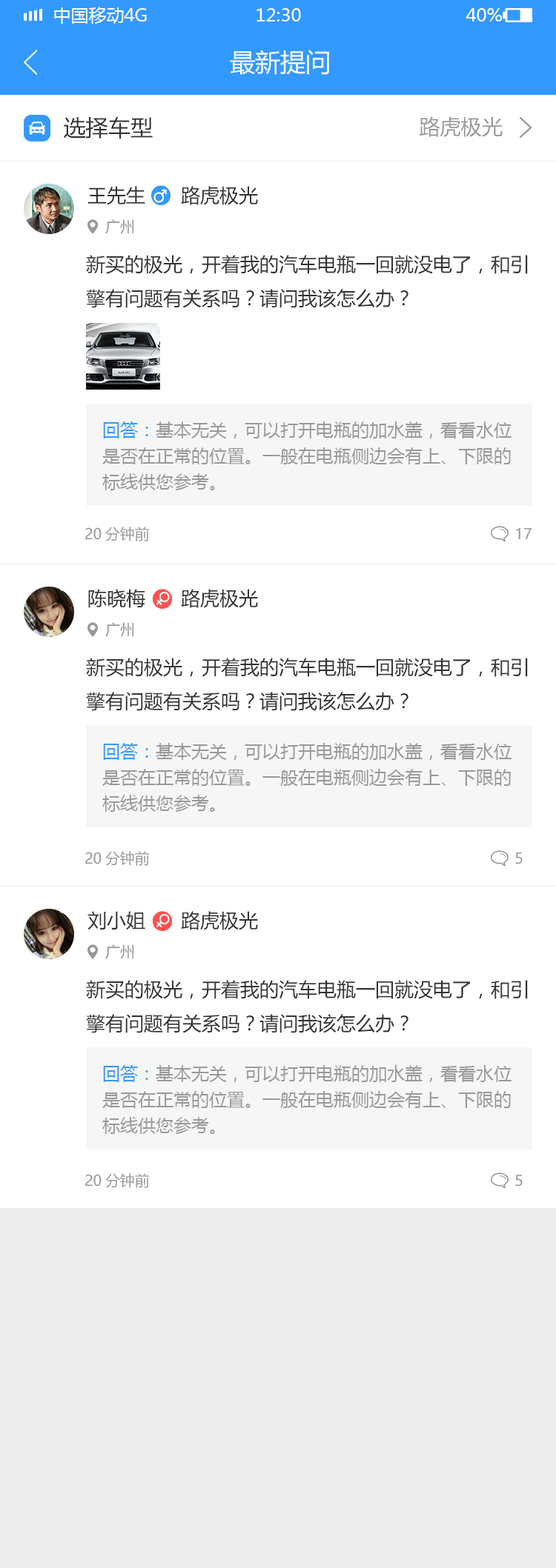
<style>
.page{position:relative;width:556px;height:1568px;background:#ffffff}
.page>*{position:absolute;margin:0}
.t1{font:17.8px "MicrosoftYaHei";color:#ffffff;text-transform:uppercase}
.t2{font:25.2px "MicrosoftYaHei";color:#ffffff}
.t3{font:22.2px "MicrosoftYaHei";color:#333333}
.t4{font:20.7px "MicrosoftYaHei";color:#999999}
.t5{font:19.3px "MicrosoftYaHei";color:#333333}
.t6{font:14.8px "MicrosoftYaHei";color:#999999}
.t7{font:17.8px/25.9px "MicrosoftYaHei";color:#999999}
.t8{font:17.8px/25.9px "MicrosoftYaHei";color:#3399ff}
</style>
<div class="page">
<p class="t1" style="left:54px;top:7px;width:93px;height:17px">中国移动4G</p>
<p class="t1" style="left:256px;top:8px;width:45px;height:13px">12:30</p>
<p class="t1" style="left:465px;top:8px;width:36px;height:13px">40%</p>
<p class="t2" style="left:230px;top:50px;width:99px;height:25px">最新提问</p>
<p class="t3" style="left:64px;top:116px;width:89px;height:23px">选择车型</p>
<p class="t4" style="left:419px;top:116px;width:83px;height:21px">路虎极光</p>
<p class="t5" style="left:87px;top:186px;width:58px;height:19px">王先生</p>
<p class="t5" style="left:181px;top:186px;width:77px;height:19px">路虎极光</p>
<p class="t6" style="left:105px;top:219px;width:29px;height:15px">广州</p>
<p class="t5" style="left:86px;top:255px;width:441px;height:53px">新买的极光，开着我的汽车电瓶一回就没电了，和引<br>擎有问题有关系吗？请问我该怎么办？</p>
<p class="t7" style="left:102px;top:421px;width:409px;height:69px"><span class="t8">回答：</span>基本无关，可以打开电瓶的加水盖，看看水位<br>是否在正常的位置。一般在电瓶侧边会有上、下限的<br>标线供您参考。</p>
<p class="t6" style="left:85px;top:527px;width:64px;height:14px">20分钟前</p>
<p class="t6" style="left:516px;top:527px;width:16px;height:13px">17</p>
<p class="t5" style="left:88px;top:589px;width:57px;height:19px">陈晓梅</p>
<p class="t5" style="left:181px;top:589px;width:77px;height:19px">路虎极光</p>
<p class="t6" style="left:105px;top:622px;width:29px;height:15px">广州</p>
<p class="t5" style="left:86px;top:658px;width:441px;height:53px">新买的极光，开着我的汽车电瓶一回就没电了，和引<br>擎有问题有关系吗？请问我该怎么办？</p>
<p class="t7" style="left:102px;top:743px;width:409px;height:69px"><span class="t8">回答：</span>基本无关，可以打开电瓶的加水盖，看看水位<br>是否在正常的位置。一般在电瓶侧边会有上、下限的<br>标线供您参考。</p>
<p class="t6" style="left:85px;top:851px;width:64px;height:15px">20分钟前</p>
<p class="t6" style="left:515px;top:852px;width:7px;height:12px">5</p>
<p class="t5" style="left:87px;top:911px;width:58px;height:19px">刘小姐</p>
<p class="t5" style="left:181px;top:911px;width:77px;height:19px">路虎极光</p>
<p class="t6" style="left:105px;top:944px;width:29px;height:15px">广州</p>
<p class="t5" style="left:86px;top:980px;width:441px;height:53px">新买的极光，开着我的汽车电瓶一回就没电了，和引<br>擎有问题有关系吗？请问我该怎么办？</p>
<p class="t7" style="left:102px;top:1065px;width:409px;height:69px"><span class="t8">回答：</span>基本无关，可以打开电瓶的加水盖，看看水位<br>是否在正常的位置。一般在电瓶侧边会有上、下限的<br>标线供您参考。</p>
<p class="t6" style="left:85px;top:1173px;width:64px;height:15px">20分钟前</p>
<p class="t6" style="left:515px;top:1174px;width:7px;height:13px">5</p>
</div>
